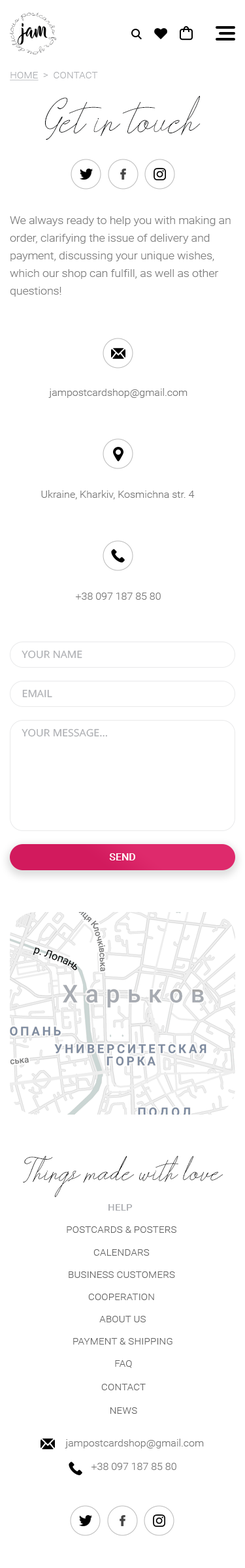
<style>
.page{position:relative;width:245px;height:1568px;background:#ffffff}
.page>*{position:absolute;margin:0}
.t1{font:9.1px "Roboto-Light";color:#adafb3;text-transform:uppercase;scale:1.1 1}
.t2{font:9.1px "Roboto-Light";color:#adafb3;text-transform:uppercase;text-decoration:underline;scale:1.1 1}
.t3{font:32.7px "nether";color:#090b0c}
.t4{font:10.5px/17.6px "Roboto-Light";color:#7f7f7f;scale:1.1 1}
.t5{font:9.9px "Roboto-Light";color:#767676;scale:1.05 1}
.t6{font:9.9px "OpenSans-Regular";color:#adafb3;text-transform:uppercase;scale:1.05 1}
.t7{font:9.9px "Roboto-Medium";color:#ffffff;text-transform:uppercase;scale:1.05 1}
.t8{font:21.7px "nether";color:#000000;scale:1.05 1}
.t9{font:9.1px "Roboto-Medium";color:#adafb3;text-transform:uppercase;scale:1.1 1}
.t10{font:9.1px "Roboto-Light";color:#636363;text-transform:uppercase;scale:1.1 1}
</style>
<div class="page">
<p class="t1" style="left:10px;top:72px;width:88px;height:9px"><span class="t2">home</span>  &gt;  contact</p>
<p class="t3" style="left:45px;top:95px;width:156px;height:45px">Get in touch</p>
<p class="t4" style="left:10px;top:216px;width:221px;height:81px">We always ready to help you with making an <br>order, clarifying the issue of delivery and <br>payment, discussing your unique wishes, <br>which our shop can fulfill, as well as other <br>questions!</p>
<p class="t5" style="left:48px;top:388px;width:140px;height:10px">jampostcardshop@gmail.com</p>
<p class="t5" style="left:41px;top:490px;width:154px;height:10px">Ukraine, Kharkiv, Kosmichna str. 4</p>
<p class="t5" style="left:76px;top:593px;width:85px;height:7px">+38 097 187 85 80</p>
<p class="t6" style="left:22px;top:650px;width:60px;height:9px">your name</p>
<p class="t6" style="left:22px;top:689px;width:30px;height:9px">email</p>
<p class="t6" style="left:22px;top:728px;width:85px;height:9px">your message...</p>
<p class="t7" style="left:109px;top:853px;width:26px;height:7px">send</p>
<p class="t8" style="left:23px;top:1156px;width:200px;height:42px;text-align:center">Things made with love</p>
<p class="t9" style="left:108px;top:1204px;width:25px;height:7px">help</p>
<p class="t10" style="left:67px;top:1226px;width:109px;height:7px">postcards &amp; posters</p>
<p class="t10" style="left:93px;top:1249px;width:57px;height:7px">calendars</p>
<p class="t10" style="left:69px;top:1271px;width:106px;height:7px">business customers</p>
<p class="t10" style="left:88px;top:1294px;width:66px;height:6px">cooperation</p>
<p class="t10" style="left:99px;top:1316px;width:47px;height:6px">about us</p>
<p class="t10" style="left:73px;top:1338px;width:99px;height:7px">payment &amp; shipping</p>
<p class="t10" style="left:115px;top:1360px;width:17px;height:8px">faq</p>
<p class="t10" style="left:101px;top:1384px;width:45px;height:6px">contact</p>
<p class="t10" style="left:110px;top:1407px;width:27px;height:7px">news</p>
<p class="t5" style="left:65px;top:1439px;width:139px;height:9px">jampostcardshop@gmail.com</p>
<p class="t5" style="left:91px;top:1463px;width:85px;height:7px">+38 097 187 85 80</p>
</div>
